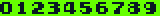
<style>
.page{position:relative;width:160px;height:16px;background:#65ff00}
.page>*{position:absolute;margin:0}
.t1{font:16px "Early-GameBoy";color:#071821}
</style>
<div class="page">
<p class="t1" style="left:0px;top:2px;width:156px;height:12px">0123456789</p>
</div>
